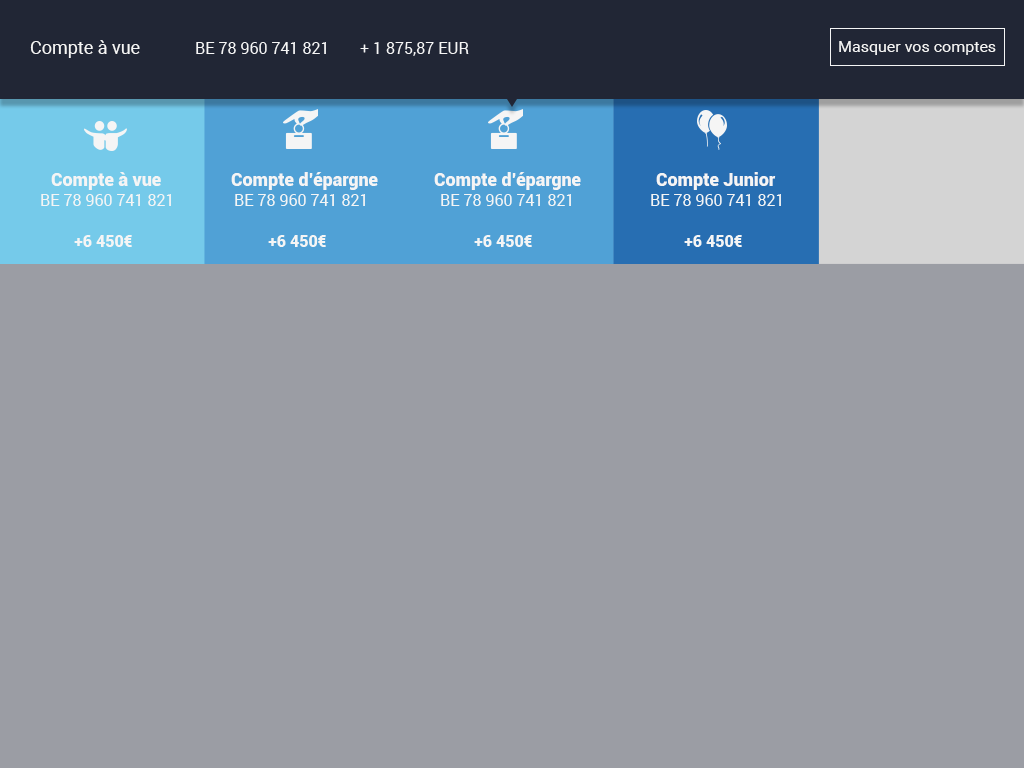
<style>
.page{position:relative;width:1024px;height:768px;background:#9b9da4}
.page>*{position:absolute;margin:0}
.t1{font:18px "Roboto-Regular";color:#f5f5f5}
.t2{font:16px "Roboto-Regular";color:#f5f5f5}
.t3{font:18px "Roboto-Black";color:#f5f5f5}
.t4{font:16px "Roboto-Black";color:#f5f5f5}
</style>
<div class="page">
<p class="t1" style="left:30px;top:40px;width:110px;height:18px">Compte à vue</p>
<p class="t2" style="left:839px;top:41px;width:157px;height:14px">Masquer vos comptes</p>
<p class="t2" style="left:196px;top:42px;width:130px;height:12px">BE 78 960 741 821</p>
<p class="t2" style="left:360px;top:42px;width:109px;height:14px">+ 1 875,87 EUR</p>
<p class="t3" style="left:51px;top:172px;width:110px;height:18px">Compte à vue</p>
<p class="t3" style="left:231px;top:172px;width:147px;height:18px">Compte d’épargne</p>
<p class="t3" style="left:434px;top:172px;width:147px;height:18px">Compte d’épargne</p>
<p class="t3" style="left:656px;top:172px;width:120px;height:18px">Compte Junior</p>
<p class="t2" style="left:41px;top:194px;width:130px;height:12px">BE 78 960 741 821</p>
<p class="t2" style="left:235px;top:194px;width:130px;height:12px">BE 78 960 741 821</p>
<p class="t2" style="left:441px;top:194px;width:130px;height:12px">BE 78 960 741 821</p>
<p class="t2" style="left:651px;top:194px;width:130px;height:12px">BE 78 960 741 821</p>
<p class="t4" style="left:74px;top:235px;width:58px;height:12px">+6 450€</p>
<p class="t4" style="left:268px;top:235px;width:58px;height:12px">+6 450€</p>
<p class="t4" style="left:474px;top:235px;width:58px;height:12px">+6 450€</p>
<p class="t4" style="left:684px;top:235px;width:58px;height:12px">+6 450€</p>
</div>
